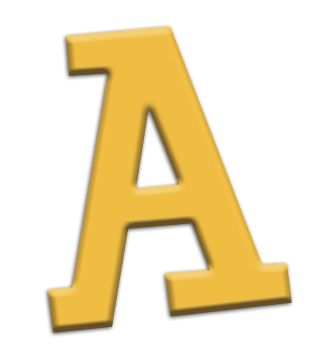
<style>
.page{position:relative;width:320px;height:352px;background:#ffffff}
.page>*{position:absolute;margin:0}
.t1{font:422px "FinkHeavy";color:#efbd42}
</style>
<div class="page">
<p class="t1" style="left:48px;top:26px;width:244px;height:307px;rotate:-5deg">A</p>
</div>
